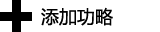
<style>
.page{position:relative;width:160px;height:32px;background:#ffffff}
.page>*{position:absolute;margin:0}
.t1{font:18px "MicrosoftYaHei";color:#000000}
</style>
<div class="page">
<p class="t1" style="left:41px;top:7px;width:72px;height:19px">添加功略</p>
</div>
